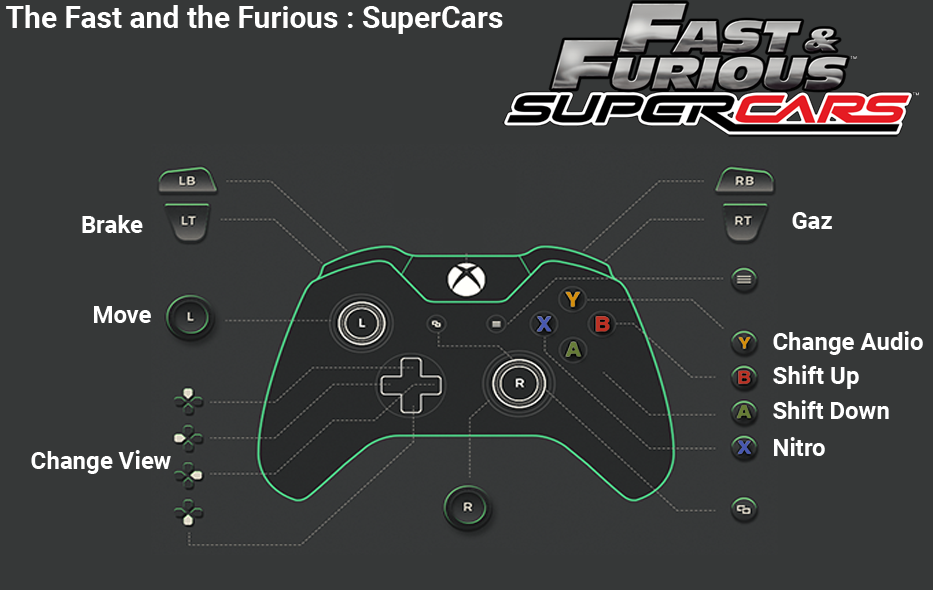
<style>
.page{position:relative;width:933px;height:590px;background:#363838}
.page>*{position:absolute;margin:0}
.t1{font:30px "Roboto-Bold";color:#ffffff}
.t2{font:24px "Roboto-Bold";color:#ffffff}
</style>
<div class="page">
<p class="t1" style="left:6px;top:5px;width:497px;height:29px">The Fast and the Furious : SuperCars</p>
<p class="t2" style="left:82px;top:215px;width:61px;height:18px">Brake</p>
<p class="t2" style="left:792px;top:212px;width:40px;height:17px">Gaz</p>
<p class="t2" style="left:94px;top:306px;width:57px;height:17px">Move</p>
<p class="t2" style="left:773px;top:331px;width:150px;height:24px">Change Audio</p>
<p class="t2" style="left:773px;top:365px;width:86px;height:24px">Shift Up</p>
<p class="t2" style="left:773px;top:400px;width:116px;height:19px">Shift Down</p>
<p class="t2" style="left:774px;top:437px;width:51px;height:19px">Nitro</p>
<p class="t2" style="left:31px;top:450px;width:140px;height:24px">Change View</p>
</div>
